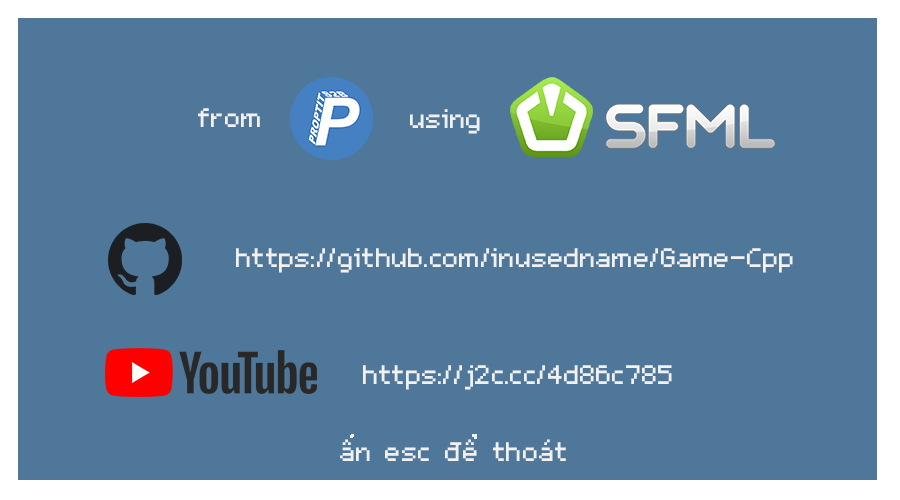
<style>
.page{position:relative;width:900px;height:500px;background:#4e779a}
.page>*{position:absolute;margin:0}
.t1{font:43px "m5x7";color:#f1f1f1}
</style>
<div class="page">
<p class="t1" style="left:198px;top:108px;width:62px;height:19px">from</p>
<p class="t1" style="left:410px;top:109px;width:70px;height:25px">using</p>
<p class="t1" style="left:236px;top:248px;width:557px;height:25px">https://github.com/inusedname/Game-Cpp</p>
<p class="t1" style="left:363px;top:365px;width:309px;height:25px">https://j2c.cc/4d86c785</p>
<p class="t1" style="left:340px;top:439px;width:226px;height:22px">ân esc đê thoát</p>
</div>
